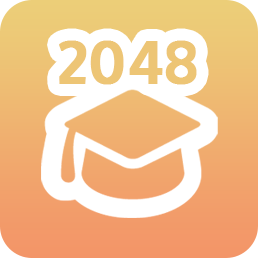
<style>
.page{position:relative;width:258px;height:258px;background:#ffffff}
.page>*{position:absolute;margin:0}
.t1{font:57.8px "Oxygen-Bold";color:#edc575;font-weight:bold}
</style>
<div class="page">
<p class="t1" style="left:59px;top:40px;width:138px;height:45px">2048</p>
</div>
